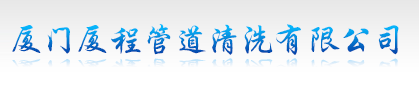
<style>
.page{position:relative;width:419px;height:86px}
.page>*{position:absolute;margin:0}
.t1{font:33px "Tensentype-BoDangXingKaiJ"}
.t2{font:19px "Tensentype-BoDangXingKaiJ";scale:1.74 1}
</style>
<div class="page">
<p class="t1" style="left:12px;top:24px;width:387px;height:31px">厦门厦程管道清洗有限公司</p>
<p class="t2" style="left:12px;top:58px;width:387px;height:18px">厦门厦程管道清洗有限公司</p>
</div>
